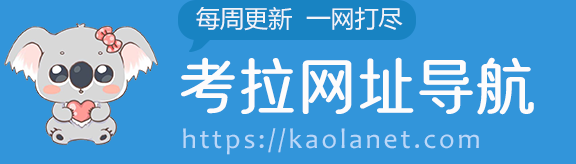
<style>
.page{position:relative;width:576px;height:164px;background:#3295da}
.page>*{position:absolute;margin:0}
.t1{font:59.2px "YOUSHEhaoshenti";letter-spacing:-0.075em;color:#fdfcfc;scale:1.25 1}
.t2{font:28px "Candara";letter-spacing:0.1em;color:#bad7f8}
</style>
<div class="page">
<p class="t1" style="left:181px;top:57px;width:353px;height:58px">考拉网址导航</p>
<p class="t2" style="left:183px;top:128px;width:296px;height:27px">https://kaolanet.com</p>
</div>
